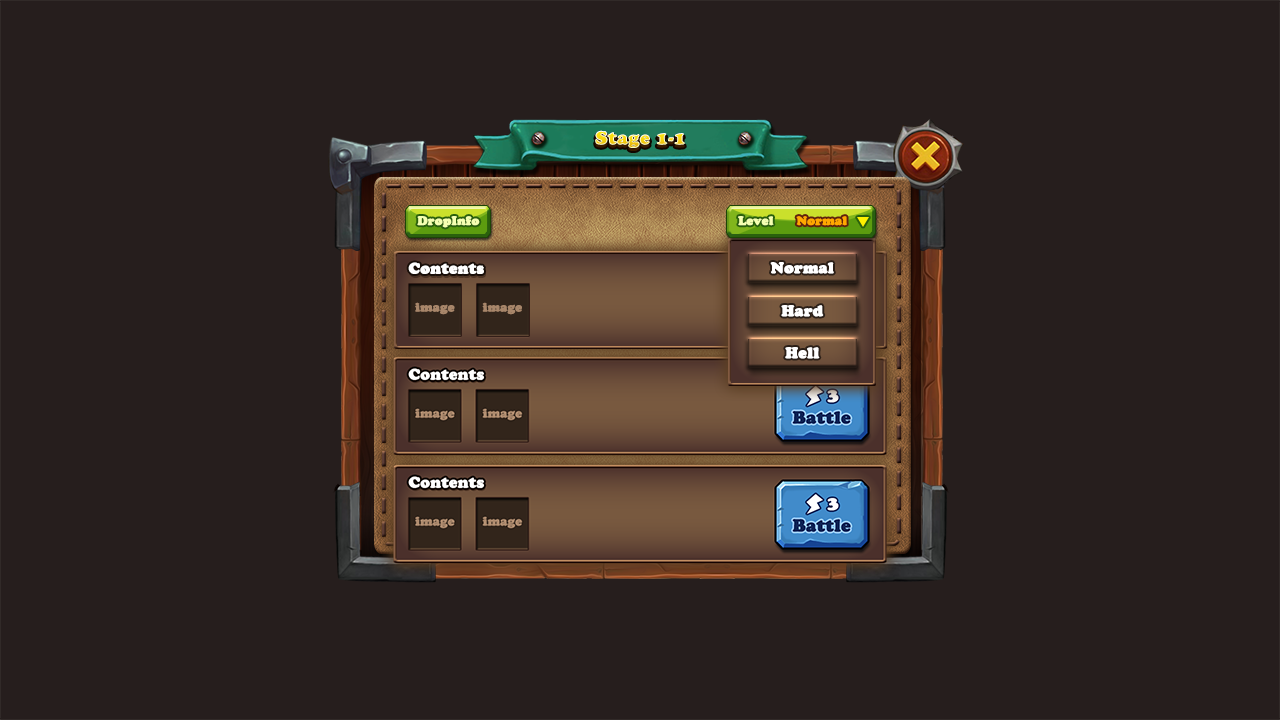
<style>
.page{position:relative;width:1280px;height:720px;background:#261e1d}
.page>*{position:absolute;margin:0}
.t1{font:18px "CooperBlackStd";font-weight:bold}
.t2{font:12px "CooperBlackStd";color:#f5ffb1;font-weight:bold}
.t3{font:12px "CooperBlackStd";color:#ffa800;font-weight:bold}
.t4{font:15px "CooperBlackStd";color:#ffffff;font-weight:bold}
.t5{font:12px "CooperBlackStd";color:#a8866a;font-weight:bold}
</style>
<div class="page">
<p class="t1" style="left:595px;top:133px;width:90px;height:18px">Stage 1-1</p>
<p class="t1" style="left:595px;top:130px;width:90px;height:18px">Stage 1-1</p>
<p class="t2" style="left:417px;top:216px;width:63px;height:12px">DropInfo</p>
<p class="t2" style="left:738px;top:216px;width:36px;height:10px">Level</p>
<p class="t3" style="left:796px;top:216px;width:51px;height:10px">Normal</p>
<p class="t4" style="left:408px;top:262px;width:76px;height:12px">Contents</p>
<p class="t4" style="left:770px;top:262px;width:64px;height:12px">Normal</p>
<p class="t5" style="left:415px;top:302px;width:40px;height:13px">image</p>
<p class="t5" style="left:482px;top:302px;width:40px;height:13px">image</p>
<p class="t4" style="left:781px;top:305px;width:43px;height:12px">Hard</p>
<p class="t4" style="left:785px;top:347px;width:35px;height:12px">Hell</p>
</div>
